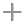
<style>
.page{position:relative;width:24px;height:24px;background:#ffffff}
.page>*{position:absolute;margin:0}
.t1{font:30px "MSReferenceSansSerif";color:#919191}
</style>
<div class="page">
<p class="t1" style="left:3px;top:3px;width:19px;height:18px">+</p>
</div>
